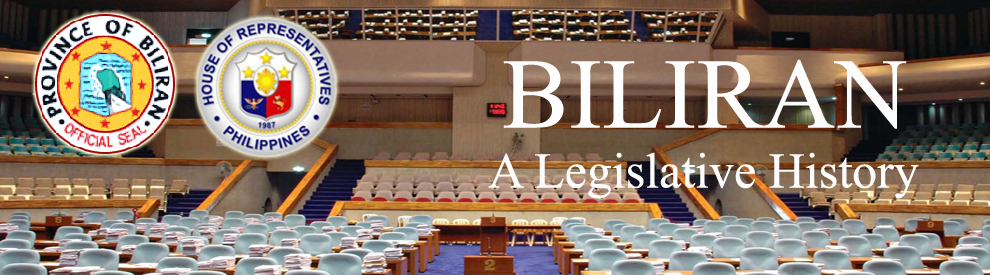
<style>
.page{position:relative;width:990px;height:275px}
.page>*{position:absolute;margin:0}
.t1{font:50px "TimesNewRomanPSMT";color:#fdfcfc}
.t2{font:100px "TimesNewRomanPSMT";color:#fdfdfd}
</style>
<div class="page">
<p class="t1" style="left:488px;top:59px;width:431px;height:140px;text-align:center"><span class="t2">BILIRAN<br></span>A Legislative History</p>
</div>
